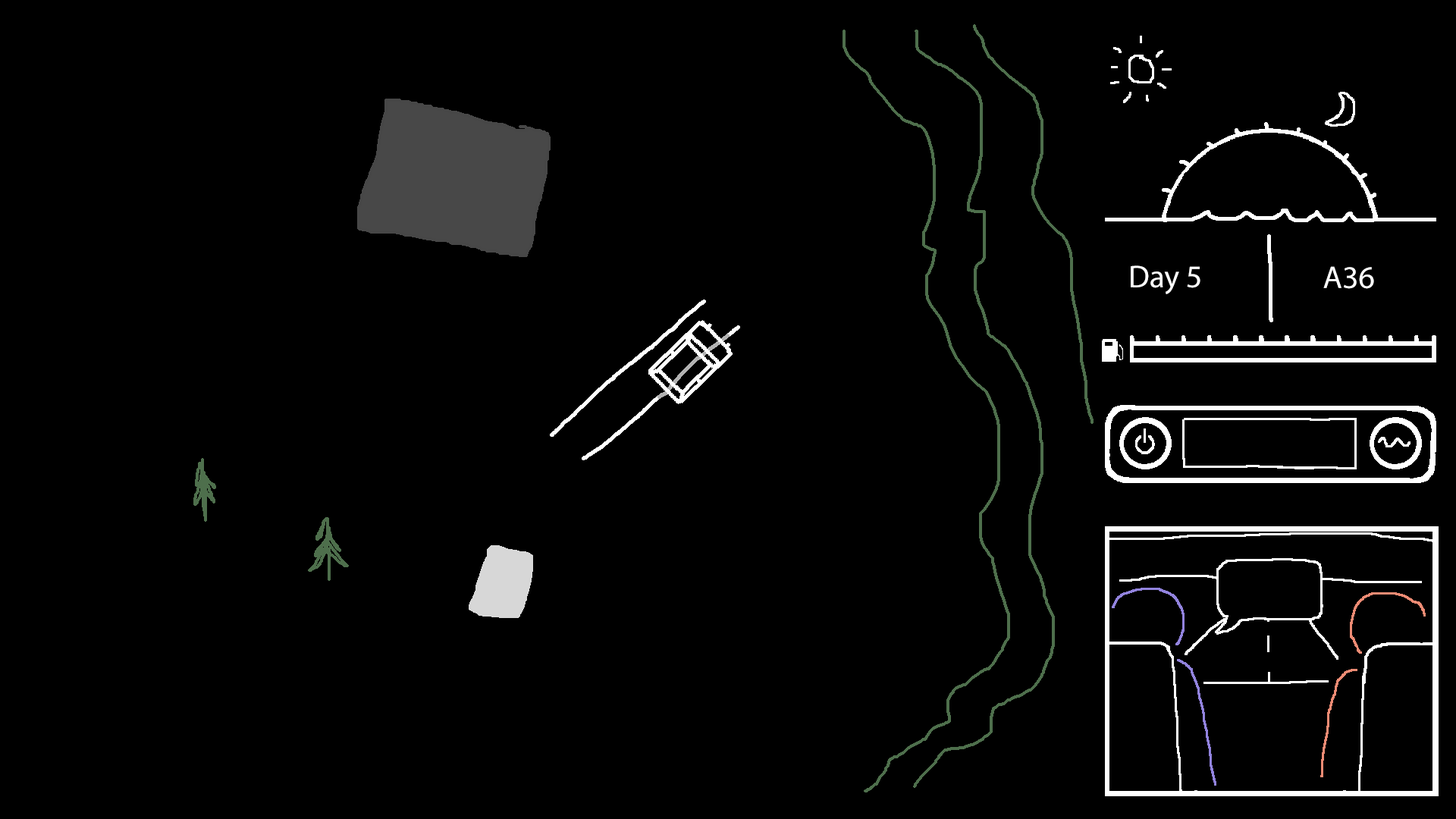
<style>
.page{position:relative;width:1456px;height:819px;background:#000000}
.page>*{position:absolute;margin:0}
.t1{font:31.6px "MyriadPro-Regular";color:#ffffff}
</style>
<div class="page">
<p class="t1" style="left:1131px;top:265px;width:69px;height:29px">Day 5</p>
<p class="t1" style="left:1323px;top:266px;width:51px;height:23px">A36</p>
</div>
